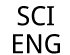
<style>
.page{position:relative;width:70px;height:55px;background:#ffffff}
.page>*{position:absolute;margin:0}
.t1{font:26.5px "DroidSans";color:#000000}
</style>
<div class="page">
<p class="t1" style="left:17px;top:6px;width:37px;height:20px">SCI</p>
<p class="t1" style="left:13px;top:34px;width:47px;height:20px">ENG</p>
</div>
